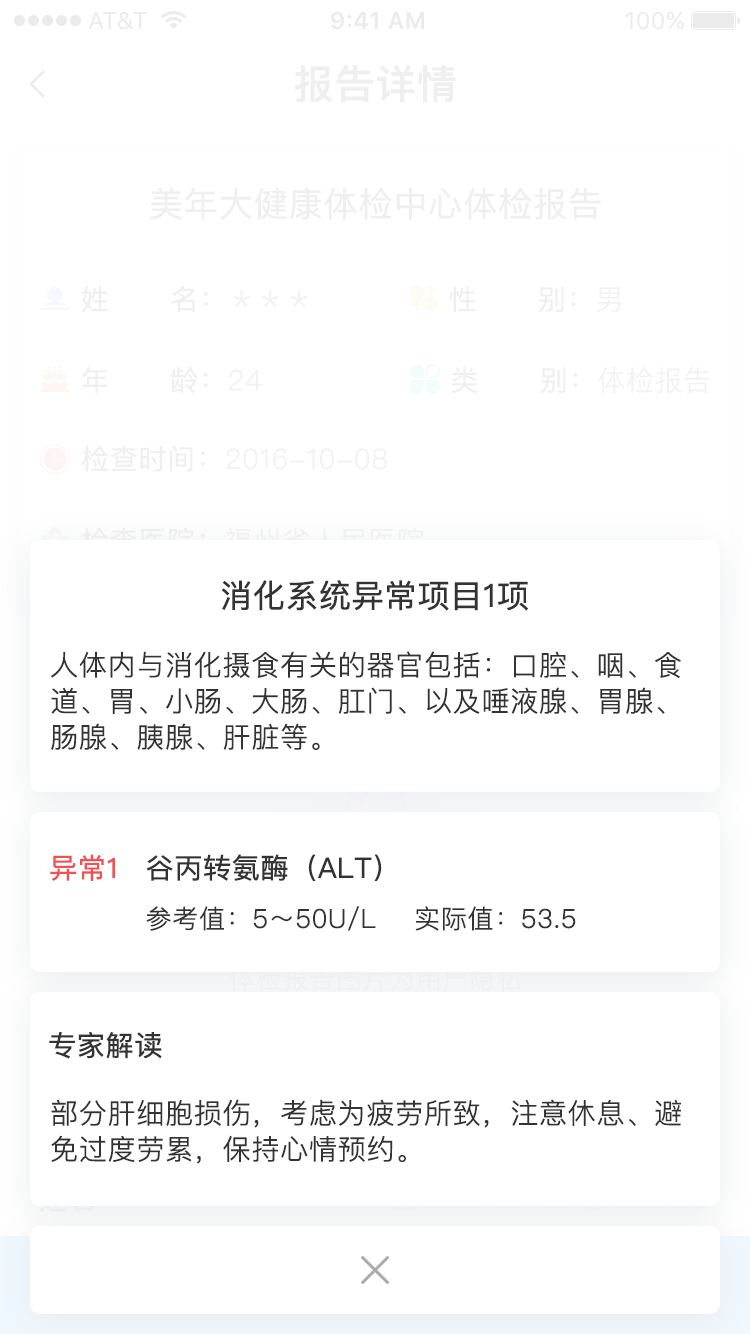
<style>
.page{position:relative;width:750px;height:1334px;background:#ffffff}
.page>*{position:absolute;margin:0}
.t1{font:40px "PingFangSC-Medium";color:#efefef;font-weight:bold}
.t2{font:34px "PingFangSC-Regular";color:#efefef;font-weight:bold}
.t3{font:28px "PingFangSC-Regular";color:#efefef;font-weight:bold}
.t4{font:28px "PingFangSC-Light";color:#efefef;font-weight:bold}
.t5{font:28px "PingFangSC-Regular";color:#f2f2f2;font-weight:bold}
.t6{font:28px "PingFangSC-Light";color:#f2f2f2;font-weight:bold}
.t7{font:28px "PingFangSC-Light";color:#ffffff;font-weight:bold}
.t8{font:28px "PingFangSC-Regular";color:#ffffff;font-weight:bold}
.t9{font:32px "PingFangSC-Regular";color:#333333;font-weight:bold}
.t10{font:28px/36px "PingFangSC-Light";color:#333333;font-weight:bold}
.t11{font:28px "PingFangSC-Regular";color:#f54f52;font-weight:bold}
.t12{font:28px "PingFangSC-Regular";color:#333333;font-weight:bold}
.t13{font:26px "PingFangSC-Light";color:#333333;font-weight:bold}
.t14{font:26px "PingFangSC-Light";color:#eff0f1;font-weight:bold}
</style>
<div class="page">
<p class="t1" style="left:294px;top:64px;width:162px;height:39px">报告详情</p>
<p class="t2" style="left:150px;top:187px;width:451px;height:33px">美年大健康体检中心体检报告</p>
<p class="t3" style="left:82px;top:286px;width:226px;height:27px">姓      名：<span class="t4">＊＊＊</span></p>
<p class="t3" style="left:449px;top:286px;width:172px;height:27px">性      别：<span class="t4">男</span></p>
<p class="t3" style="left:82px;top:366px;width:180px;height:28px">年      龄：<span class="t4">24</span></p>
<p class="t5" style="left:452px;top:367px;width:259px;height:27px">类      别：<span class="t6">体检报告</span></p>
<p class="t4" style="left:81px;top:445px;width:306px;height:27px"><span class="t3">检查时间：</span>2016-10-08</p>
<p class="t7" style="left:81px;top:527px;width:343px;height:27px"><span class="t8">检查医院：</span>福州省人民医院</p>
<p class="t9" style="left:221px;top:580px;width:307px;height:31px">消化系统异常项目1项</p>
<p class="t10" style="left:51px;top:651px;width:630px;height:99px">人体内与消化摄食有关的器官包括：口腔、咽、食道、胃、小肠、大肠、肛门、以及唾液腺、胃腺、肠腺、胰腺、肝脏等。</p>
<p class="t11" style="left:50px;top:854px;width:65px;height:27px">异常1</p>
<p class="t12" style="left:146px;top:854px;width:236px;height:27px">谷丙转氨酶（ALT）</p>
<p class="t13" style="left:146px;top:906px;width:430px;height:25px">参考值：5～50U/L    实际值：53.5</p>
<p class="t14" style="left:229px;top:966px;width:292px;height:25px">体检报告图片为用户隐私</p>
<p class="t12" style="left:49px;top:1032px;width:113px;height:27px">专家解读</p>
<p class="t10" style="left:51px;top:1099px;width:630px;height:65px">部分肝细胞损伤，考虑为疲劳所致，注意休息、避免过度劳累，保持心情预约。</p>
</div>
